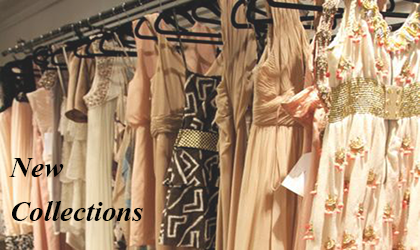
<style>
.page{position:relative;width:420px;height:250px}
.page>*{position:absolute;margin:0}
.t1{font:36px "Vijaya-Bold";color:#030303}
.t2{font:36px "MyriadPro-Bold";color:#030303}
</style>
<div class="page">
<p class="t1" style="left:9px;top:158px;width:134px;height:63px"><span class="t2"><br><br></span>New <br>Collections</p>
</div>
